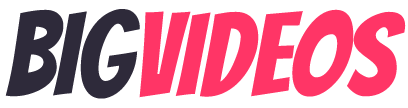
<style>
.page{position:relative;width:408px;height:108px;background:#ffffff}
.page>*{position:absolute;margin:0}
.t1{font:115.8px "Bangers-Regular";color:#2e2a3a;scale:0.97 1}
.t2{font:115px "Bangers-Regular";color:#ff3566}
</style>
<div class="page">
<p class="t1" style="left:5px;top:9px;width:135px;height:90px">BIG</p>
<p class="t2" style="left:139px;top:9px;width:267px;height:89px">VIDEOS</p>
</div>
